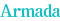
<style>
.page{position:relative;width:60px;height:21px;background:#ffffff}
.page>*{position:absolute;margin:0}
.t1{font:17.5px "RyuminPro-ExBold";letter-spacing:-0.08em;color:#1cbdc0}
</style>
<div class="page">
<p class="t1" style="left:0px;top:4px;width:61px;height:13px">Armada</p>
</div>
